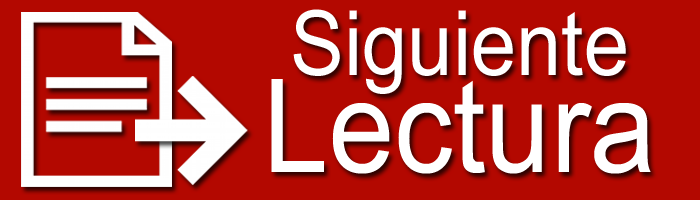
<style>
.page{position:relative;width:700px;height:200px;background:#b30800}
.page>*{position:absolute;margin:0}
.t1{font:90px "ArialMT";color:#ffffff;scale:0.9 1}
.t2{font:130px "ArialMT";color:#ffffff;scale:0.9 1}
</style>
<div class="page">
<p class="t1" style="left:293px;top:9px;width:333px;height:85px">Siguiente</p>
<p class="t2" style="left:271px;top:79px;width:380px;height:95px">Lectura</p>
</div>
